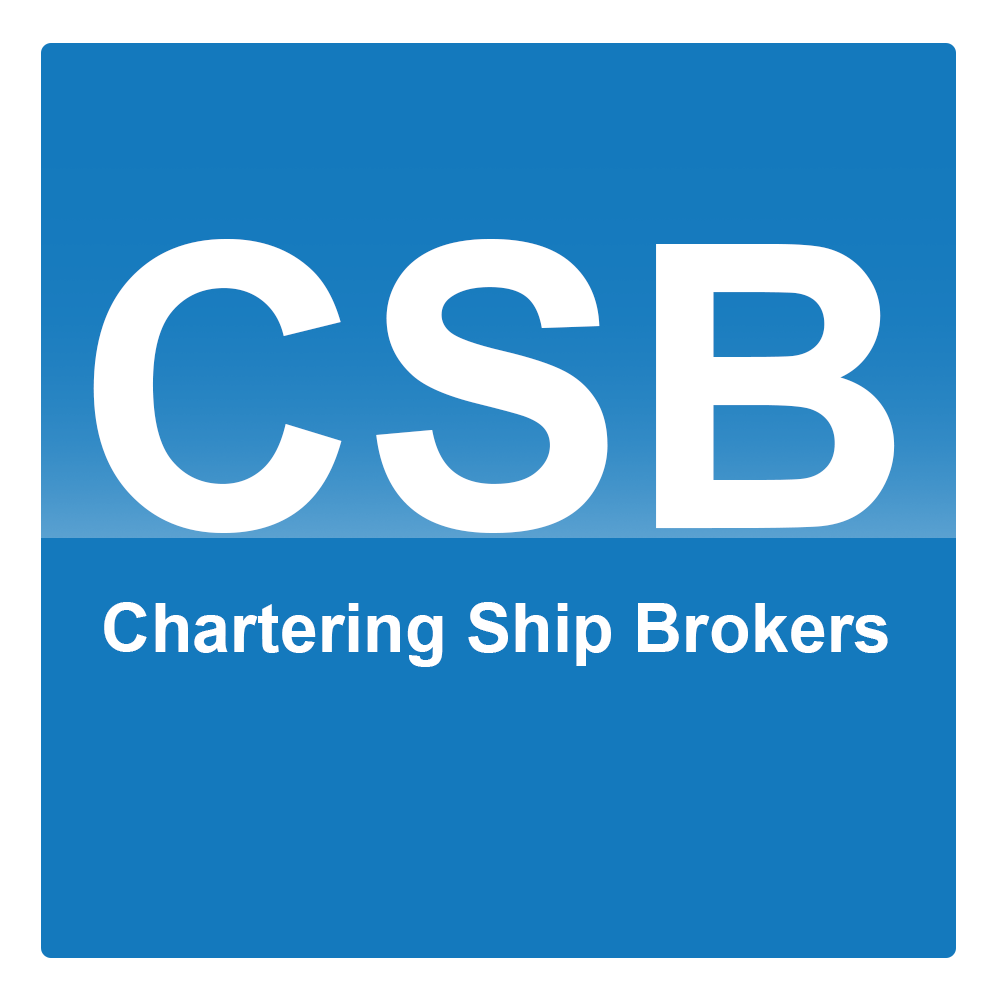
<style>
.page{position:relative;width:1000px;height:1000px;background:#1479bd}
.page>*{position:absolute;margin:0}
.t1{font:397.5px "Arial-BoldMT";color:#ffffff}
.t2{font:68.3px "Arial-BoldMT";color:#ffffff}
</style>
<div class="page">
<p class="t1" style="left:93px;top:239px;width:802px;height:294px">CSB</p>
<p class="t2" style="left:104px;top:602px;width:784px;height:65px">Chartering Ship Brokers</p>
</div>
